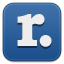
<style>
.page{position:relative;width:64px;height:64px}
.page>*{position:absolute;margin:0}
.t1{font:64px "BookmanOldStyle-Bold";color:#ffffff}
</style>
<div class="page">
<p class="t1" style="left:17px;top:14px;width:35px;height:33px">r.</p>
</div>
